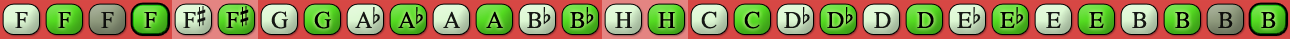
<style>
.page{position:relative;width:1290px;height:39px}
.page>*{position:absolute;margin:0}
.t1{font:24px "OpusChords";color:#000000}
.t2{font:24px "OpusChords";letter-spacing:-0.05em;color:#000000}
</style>
<div class="page">
<p class="t1" style="left:183px;top:6px;width:23px;height:22px;opacity:0.9">F#</p>
<p class="t1" style="left:226px;top:6px;width:23px;height:22px">F#</p>
<p class="t1" style="left:15px;top:12px;width:13px;height:16px;opacity:0.9">F</p>
<p class="t1" style="left:58px;top:12px;width:13px;height:16px">F</p>
<p class="t1" style="left:101px;top:12px;width:13px;height:16px;opacity:0.9">F</p>
<p class="t1" style="left:144px;top:12px;width:13px;height:16px">F</p>
<p class="t1" style="left:271px;top:11px;width:17px;height:18px;opacity:0.9">G</p>
<p class="t1" style="left:314px;top:11px;width:17px;height:18px">G</p>
<p class="t2" style="left:355px;top:7px;width:25px;height:21px;opacity:0.9">Ab</p>
<p class="t2" style="left:398px;top:7px;width:25px;height:21px">Ab</p>
<p class="t1" style="left:443px;top:11px;width:17px;height:17px;opacity:0.9">A</p>
<p class="t1" style="left:486px;top:11px;width:17px;height:17px">A</p>
<p class="t1" style="left:527px;top:7px;width:24px;height:21px;opacity:0.9">Bb</p>
<p class="t1" style="left:570px;top:7px;width:24px;height:21px">Bb</p>
<p class="t1" style="left:615px;top:12px;width:17px;height:16px;opacity:0.9">H</p>
<p class="t1" style="left:658px;top:12px;width:17px;height:16px">H</p>
<p class="t1" style="left:701px;top:11px;width:16px;height:18px;opacity:0.9">C</p>
<p class="t1" style="left:744px;top:11px;width:16px;height:18px">C</p>
<p class="t1" style="left:784px;top:7px;width:26px;height:21px;opacity:0.9">Db</p>
<p class="t1" style="left:827px;top:7px;width:26px;height:21px">Db</p>
<p class="t1" style="left:874px;top:12px;width:17px;height:16px;opacity:0.9">D</p>
<p class="t1" style="left:917px;top:12px;width:17px;height:16px">D</p>
<p class="t1" style="left:957px;top:7px;width:24px;height:21px;opacity:0.9">Eb</p>
<p class="t1" style="left:1000px;top:7px;width:24px;height:21px">Eb</p>
<p class="t1" style="left:1046px;top:12px;width:15px;height:16px;opacity:0.9">E</p>
<p class="t1" style="left:1089px;top:12px;width:15px;height:16px">E</p>
<p class="t1" style="left:1132px;top:12px;width:15px;height:16px;opacity:0.9">B</p>
<p class="t1" style="left:1175px;top:12px;width:15px;height:16px">B</p>
<p class="t1" style="left:1218px;top:12px;width:15px;height:16px;opacity:0.9">B</p>
<p class="t1" style="left:1261px;top:12px;width:15px;height:16px">B</p>
</div>
